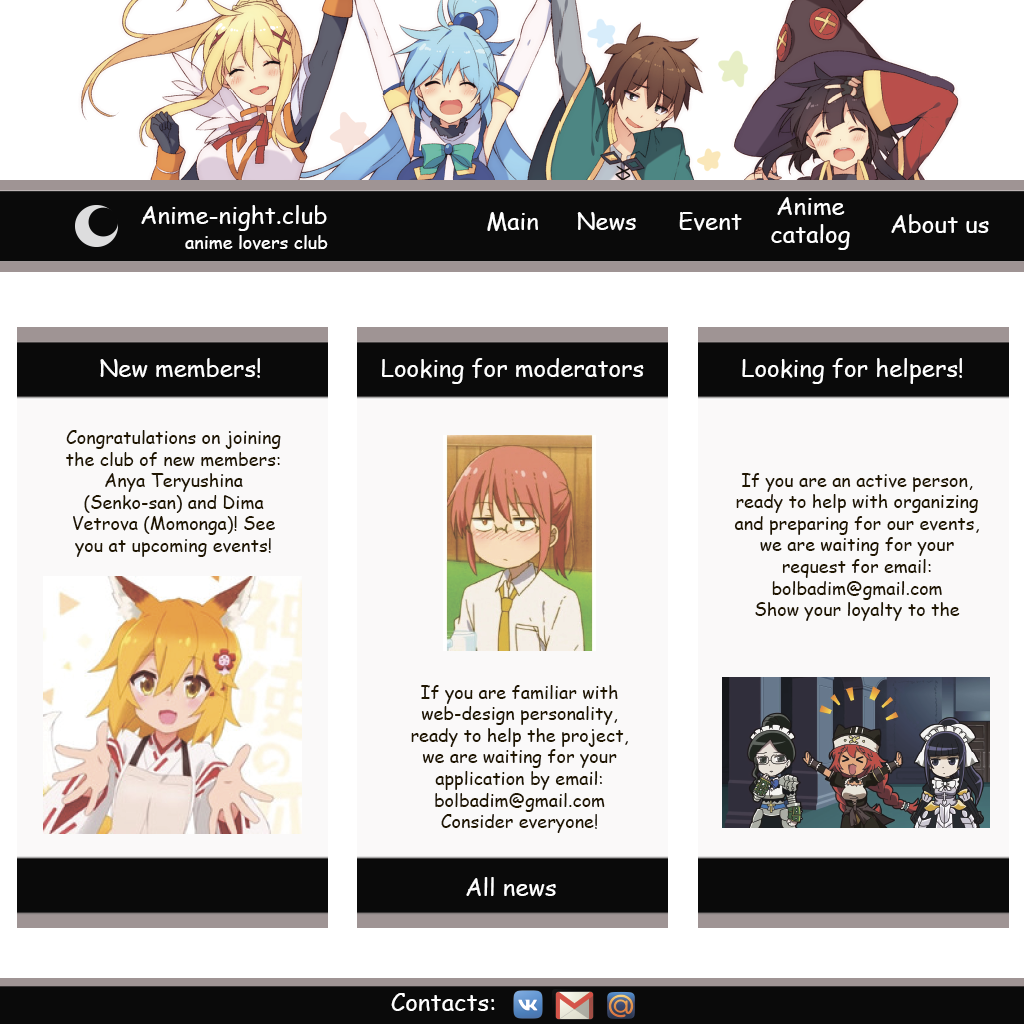
<style>
.page{position:relative;width:1024px;height:1024px;background:#faf9f9}
.page>*{position:absolute;margin:0}
.t1{font:24px "ComicSansMS";color:#ffffff}
.t2{font:18px "ComicSansMS";color:#ffffff}
.t3{font:24px "ComicSansMS";color:#fefefe}
.t4{font:18px "ComicSansMS";color:#201600}
</style>
<div class="page">
<p class="t1" style="left:771px;top:197px;width:79px;height:53px;text-align:center">Anime<br>catalog</p>
<p class="t1" style="left:141px;top:205px;width:186px;height:26px">Anime-night.club</p>
<p class="t1" style="left:487px;top:212px;width:51px;height:19px">Main</p>
<p class="t1" style="left:577px;top:212px;width:59px;height:19px">News</p>
<p class="t1" style="left:679px;top:212px;width:63px;height:19px">Event</p>
<p class="t1" style="left:891px;top:214px;width:98px;height:19px">About us</p>
<p class="t2" style="left:185px;top:235px;width:143px;height:15px">anime lovers club</p>
<p class="t3" style="left:100px;top:358px;width:160px;height:20px">New members!</p>
<p class="t3" style="left:382px;top:358px;width:262px;height:26px">Looking for moderators</p>
<p class="t3" style="left:742px;top:358px;width:220px;height:26px">Looking for helpers!</p>
<p class="t4" style="left:66px;top:430px;width:215px;height:127px;text-align:center">Congratulations on joining the club of new members: Anya Teryushina (Senko-san) and Dima Vetrova (Momonga)! See you at upcoming events!</p>
<p class="t4" style="left:734px;top:473px;width:245px;height:148px;text-align:center">If you are an active person, ready to help with organizing and preparing for our events, we are waiting for your request for email: bolbadim@gmail.com<br>Show your loyalty to the club!</p>
<p class="t4" style="left:411px;top:685px;width:217px;height:148px;text-align:center">If you are familiar with web-design personality, ready to help the project, we are waiting for your application by email: bolbadim@gmail.com<br>Consider everyone!</p>
<p class="t3" style="left:466px;top:877px;width:90px;height:20px">All news</p>
<p class="t1" style="left:391px;top:993px;width:104px;height:18px">Contacts:</p>
</div>
